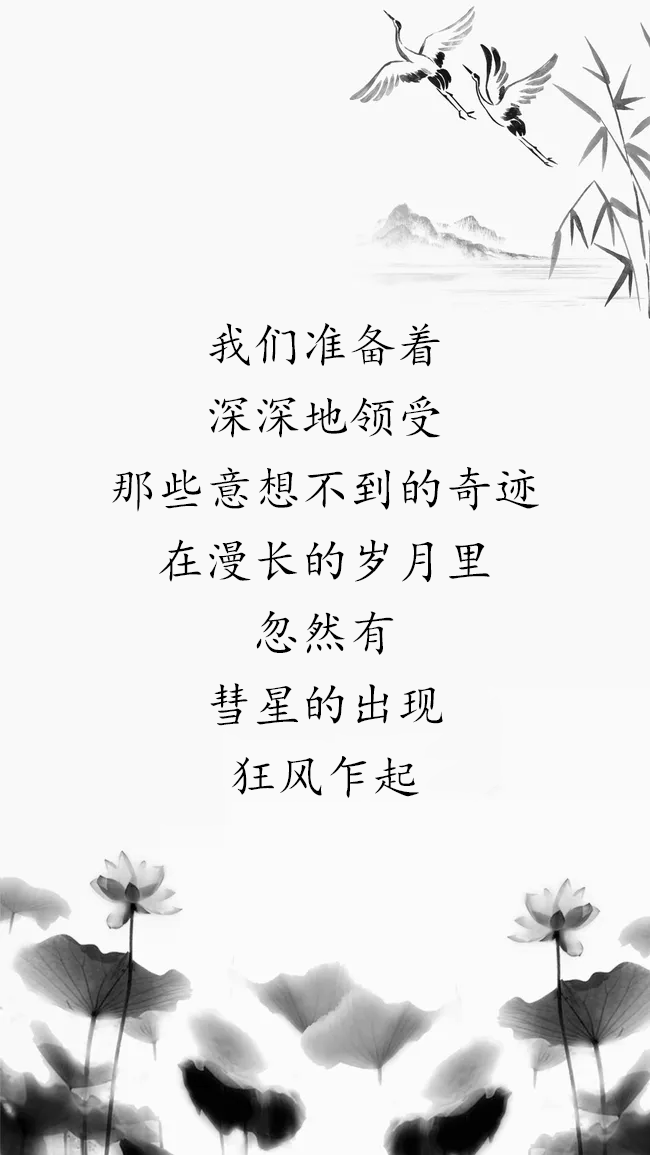
<style>
.page{position:relative;width:650px;height:1155px;background:#f9f9f9}
.page>*{position:absolute;margin:0}
.t1{font:48px/72px "KaiTi";color:#000000}
.t2{font:48px "KaiTi";color:#000000}
</style>
<div class="page">
<p class="t1" style="left:112px;top:323px;width:427px;height:475px;text-align:center">我们准备着<br>深深地领受<br>那些意想不到的奇迹<br>在漫长的岁月里<br>忽然有<br>彗星的出现<br><span class="t2">狂风乍起</span></p>
</div>
